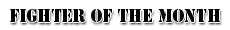
<style>
.page{position:relative;width:230px;height:30px;background:#ffffff}
.page>*{position:absolute;margin:0}
.t1{font:17.2px "StencilStd";color:#000000;text-transform:uppercase;scale:0.94 1}
</style>
<div class="page">
<p class="t1" style="left:10px;top:9px;width:210px;height:13px">Fighter of the month</p>
</div>
